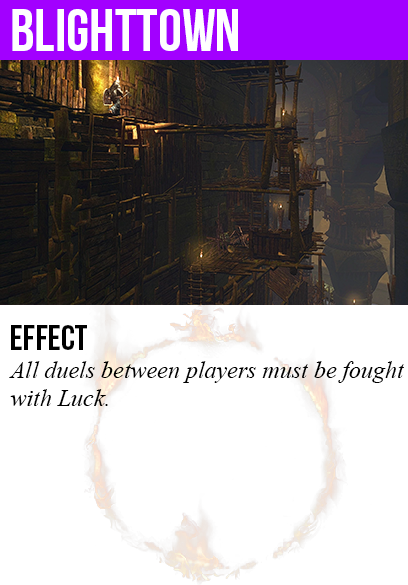
<style>
.page{position:relative;width:408px;height:585px;background:#ffffff}
.page>*{position:absolute;margin:0}
.t1{font:60px "BebasNeue";color:#ffffff}
.t2{font:36px "BebasNeue";color:#000000}
.t3{font:24px "TimesNewRomanPS-ItalicMT";color:#000000}
</style>
<div class="page">
<p class="t1" style="left:12px;top:9px;width:226px;height:42px">blighttown</p>
<p class="t2" style="left:11px;top:325px;width:76px;height:25px">Effect</p>
<p class="t3" style="left:9px;top:361px;width:395px;height:45px">All duels between players must be fought<br>with Luck.</p>
</div>
